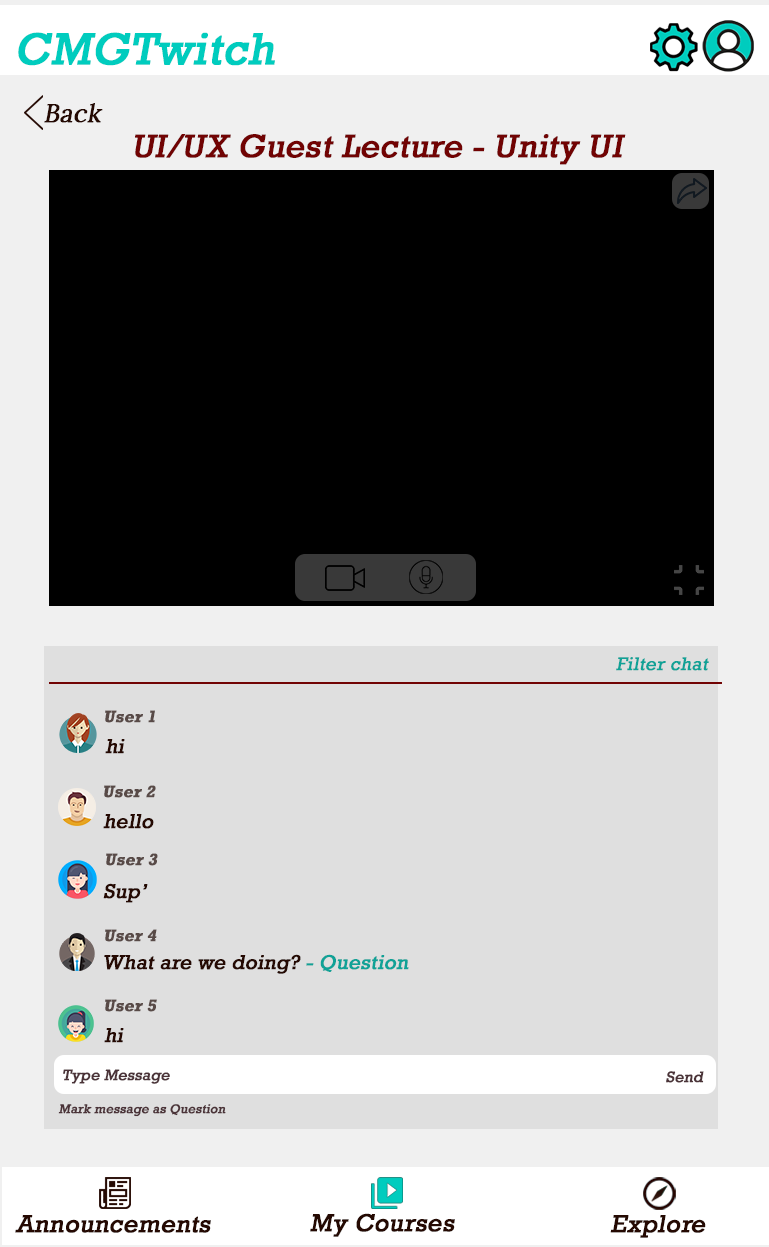
<style>
.page{position:relative;width:769px;height:1247px;background:#dfdfdf}
.page>*{position:absolute;margin:0}
.t1{font:45.4px "Rockwell";color:#00ccbe;font-weight:bold;font-style:italic}
.t2{font:25px "Lora-Regular";color:#250902;font-weight:bold;font-style:italic}
.t3{font:33.3px "Rockwell";color:#710303;font-weight:bold;font-style:italic}
.t4{font:18.7px "Rockwell";color:#10a297;font-weight:bold;font-style:italic}
.t5{font:16.7px "Rockwell-Bold";color:#584a47;font-weight:bold;font-style:italic}
.t6{font:20.5px "Rockwell";color:#250902;font-weight:bold;font-style:italic}
.t7{font:20.5px "Rockwell";color:#10a297;font-weight:bold;font-style:italic}
.t8{font:15.4px "Rockwell";color:#4b3338;font-weight:bold;font-style:italic}
.t9{font:12.8px "Rockwell";color:#4b3338;font-weight:bold;font-style:italic}
.t10{font:25px "Rockwell";color:#250902;font-weight:bold;font-style:italic}
</style>
<div class="page">
<p class="t1" style="left:18px;top:32px;width:257px;height:34px">CMGTwitch</p>
<p class="t2" style="left:44px;top:103px;width:59px;height:20px">Back</p>
<p class="t3" style="left:135px;top:134px;width:491px;height:31px">UI/UX Guest Lecture - Unity UI</p>
<p class="t4" style="left:616px;top:657px;width:93px;height:14px">Filter chat</p>
<p class="t5" style="left:105px;top:710px;width:50px;height:13px">User 1</p>
<p class="t6" style="left:105px;top:739px;width:20px;height:15px">hi</p>
<p class="t5" style="left:104px;top:785px;width:52px;height:13px">User 2</p>
<p class="t6" style="left:103px;top:814px;width:51px;height:15px">hello</p>
<p class="t5" style="left:106px;top:853px;width:52px;height:13px">User 3</p>
<p class="t6" style="left:103px;top:883px;width:45px;height:20px">Sup’</p>
<p class="t5" style="left:105px;top:929px;width:52px;height:13px">User 4</p>
<p class="t6" style="left:104px;top:954px;width:305px;height:20px">What are we doing? <span class="t7">- Question</span></p>
<p class="t5" style="left:105px;top:999px;width:52px;height:13px">User 5</p>
<p class="t6" style="left:104px;top:1028px;width:20px;height:15px">hi</p>
<p class="t8" style="left:63px;top:1069px;width:107px;height:15px">Type Message</p>
<p class="t8" style="left:666px;top:1071px;width:38px;height:12px">Send</p>
<p class="t9" style="left:58px;top:1104px;width:168px;height:13px">Mark message as Question</p>
<p class="t10" style="left:15px;top:1215px;width:196px;height:18px">Announcements</p>
<p class="t10" style="left:310px;top:1213px;width:145px;height:24px">My Courses</p>
<p class="t10" style="left:610px;top:1215px;width:96px;height:23px">Explore</p>
</div>
